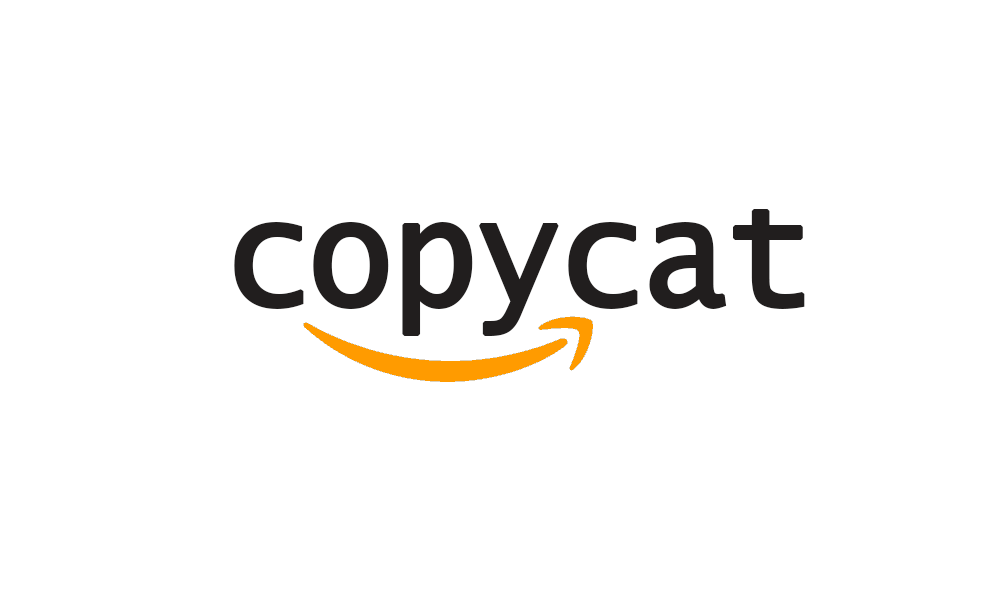
<style>
.page{position:relative;width:1000px;height:600px;background:#ffffff}
.page>*{position:absolute;margin:0}
.t1{font:149.8px "LucidaConsole";letter-spacing:-0.04em;color:#211e1e;font-weight:bold;scale:0.95 1}
</style>
<div class="page">
<p class="t1" style="left:234px;top:209px;width:571px;height:127px">copycat</p>
</div>
